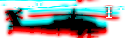
<style>
.page{position:relative;width:125px;height:38px}
.page>*{position:absolute;margin:0}
.t1{font:18px "BaskOldFace"}
</style>
<div class="page">
<p class="t1" style="left:106px;top:1px;width:6px;height:12px">I</p>
</div>
